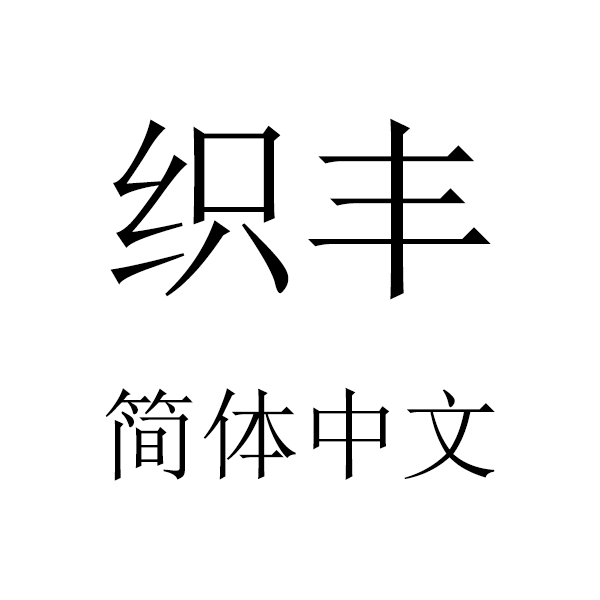
<style>
.page{position:relative;width:600px;height:600px;background:#ffffff}
.page>*{position:absolute;margin:0}
.t1{font:200px "SimSun";color:#000000}
.t2{font:100px "SimSun";color:#000000}
</style>
<div class="page">
<p class="t1" style="left:110px;top:118px;width:381px;height:182px">织丰</p>
<p class="t2" style="left:105px;top:387px;width:390px;height:94px">简体中文</p>
</div>
